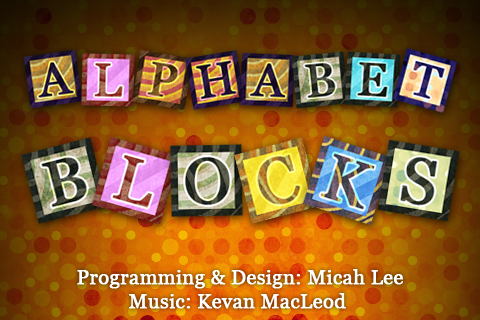
<style>
.page{position:relative;width:480px;height:320px}
.page>*{position:absolute;margin:0}
.t1{font:20px "Georgia";color:#ffffff;font-weight:bold}
</style>
<div class="page">
<p class="t1" style="left:77px;top:269px;width:326px;height:40px;text-align:center">Programming &amp; Design: Micah Lee<br>Music: Kevan MacLeod</p>
</div>
